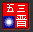
<style>
.page{position:relative;width:33px;height:32px;background:#f20000}
.page>*{position:absolute;margin:0}
.t1{font:10.4px "SimSun";color:#ffffff}
.t2{font:11.7px "SimSun";color:#ffffff}
</style>
<div class="page">
<p class="t1" style="left:7px;top:4px;width:18px;height:8px">五三</p>
<p class="t2" style="left:16px;top:15px;width:11px;height:12px">晋</p>
</div>
